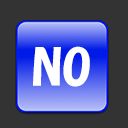
<style>
.page{position:relative;width:128px;height:128px;background:#333333}
.page>*{position:absolute;margin:0}
.t1{font:48px "HGSSoeiKakupoptai";color:#ffffff}
</style>
<div class="page">
<p class="t1" style="left:33px;top:46px;width:57px;height:41px">NO</p>
</div>
